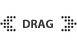
<style>
.page{position:relative;width:77px;height:44px;background:#ffffff}
.page>*{position:absolute;margin:0}
.t1{font:12px "MyriadPro-Bold";color:#333333}
</style>
<div class="page">
<p class="t1" style="left:23px;top:19px;width:30px;height:9px">DRAG</p>
</div>
